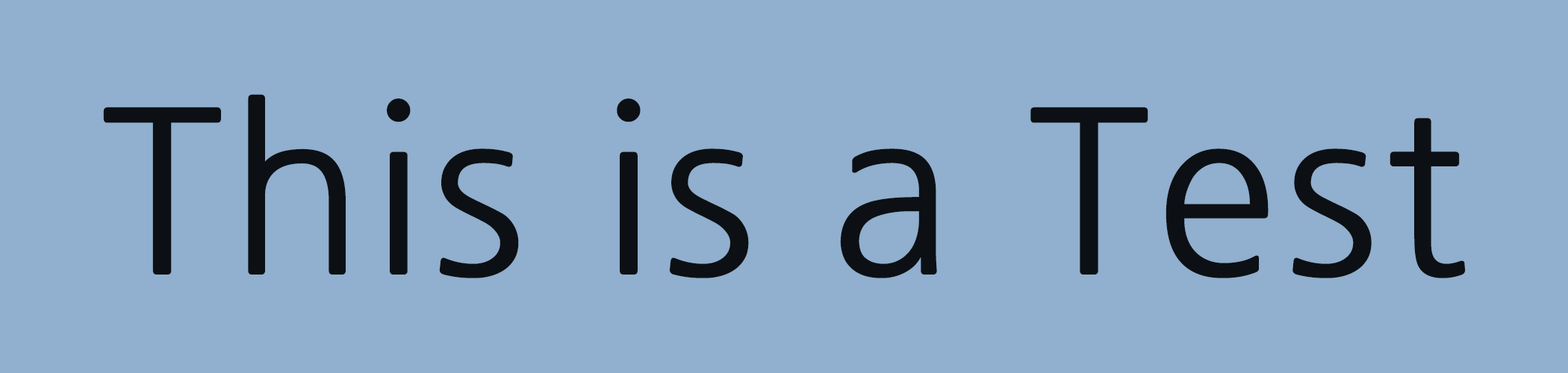
<style>
.page{position:relative;width:1568px;height:373px;background:#91afce}
.page>*{position:absolute;margin:0}
.t1{font:224px "NanumGothic";color:#0c1014;font-weight:bold}
</style>
<div class="page">
<p class="t1" style="left:103px;top:94px;width:1363px;height:185px">This is a Test</p>
</div>
